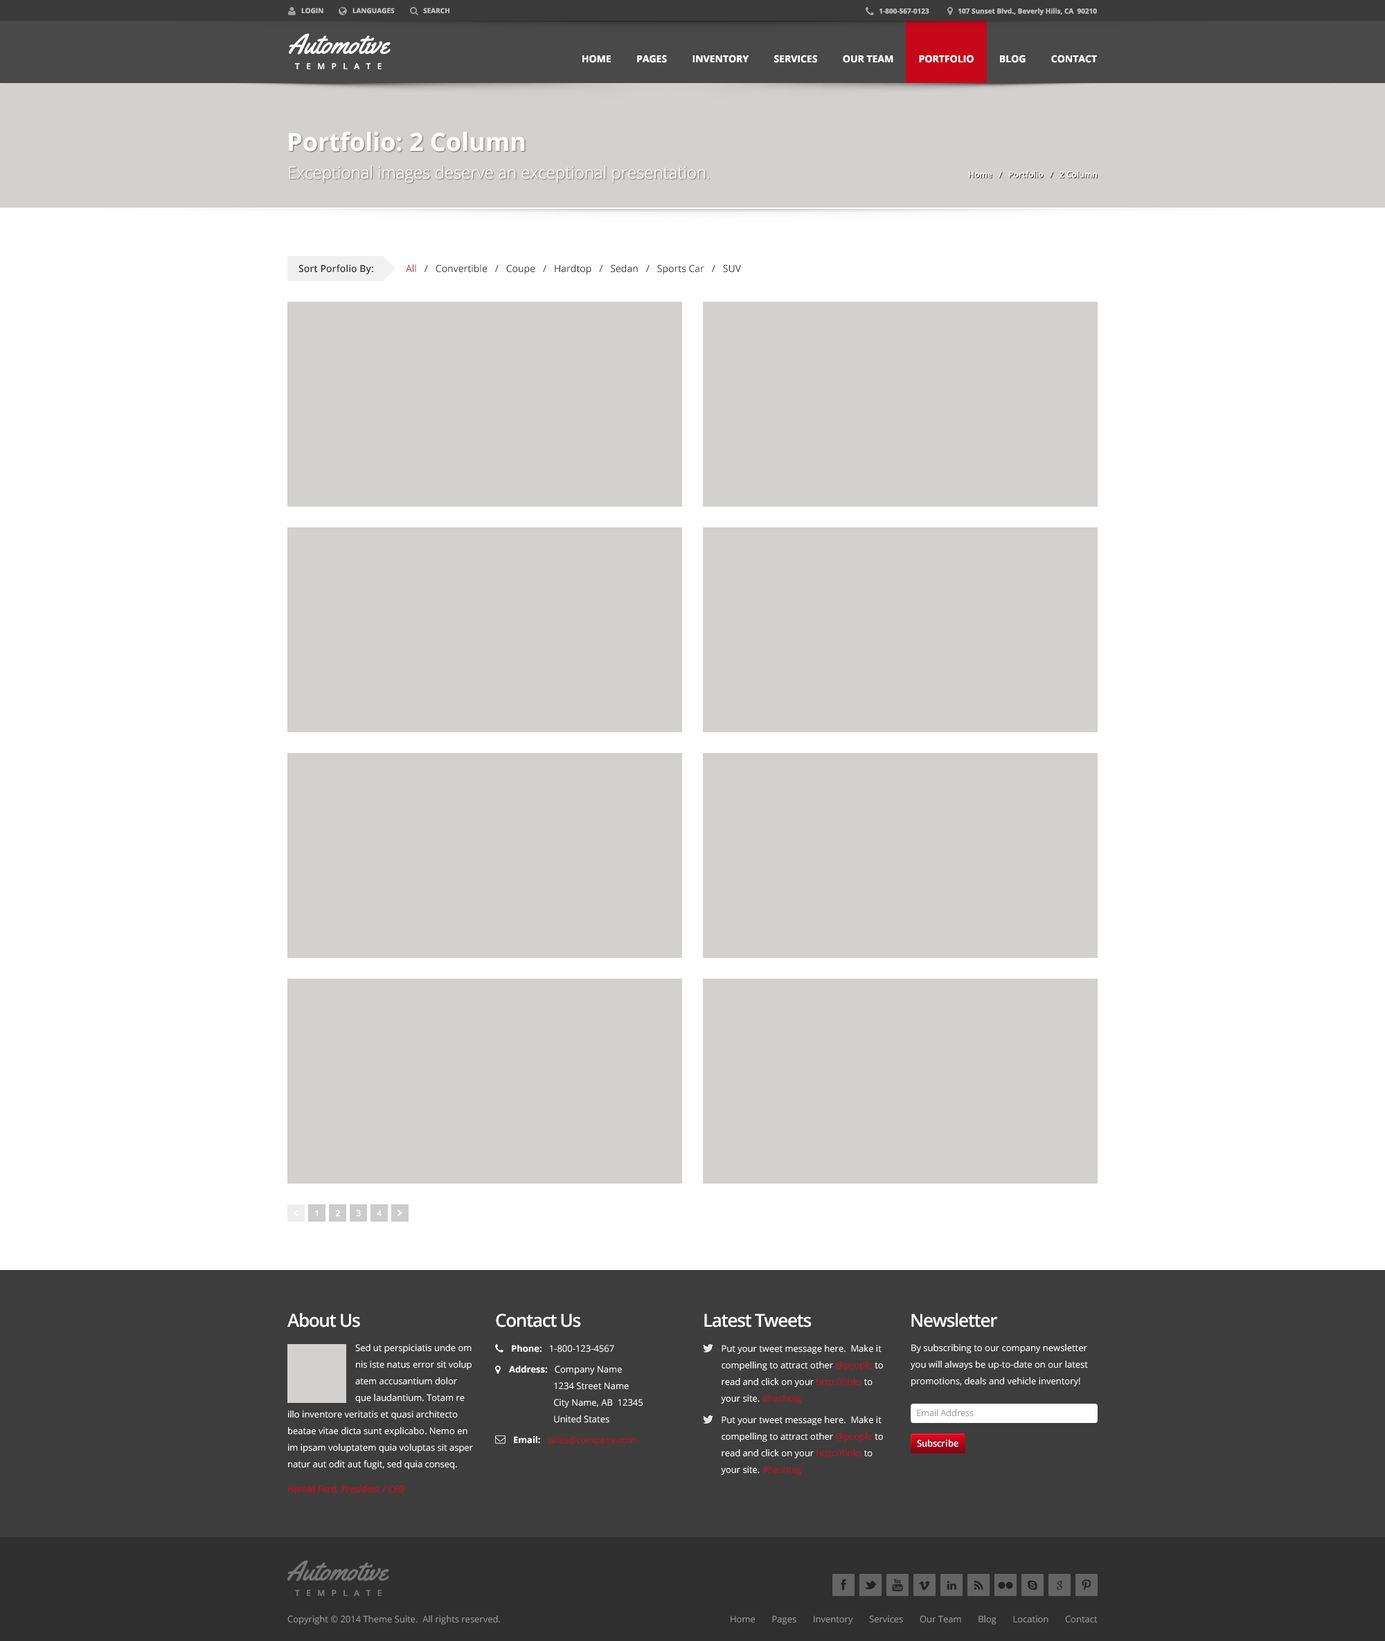
<style>
.page{position:relative;width:1385px;height:1641px;background:#d2d1d0}
.page>*{position:absolute;margin:0}
.t1{font:6.9px "OpenSans-Bold";color:#c0c0c0}
.t2{font:27.7px "Yellowtail";color:#ffffff}
.t3{font:9.7px "OpenSans-Bold";color:#ffffff}
.t4{font:24.9px "OpenSans-Bold";color:#ffffff}
.t5{font:16.6px "OpenSans-Light";color:#ffffff}
.t6{font:8.3px "OpenSans-Semibold";color:#ffffff}
.t7{font:9.7px "OpenSans";color:#2d2d2d}
.t8{font:9.7px "OpenSans-Semibold";color:#2d2d2d}
.t9{font:9.7px "OpenSans";color:#c7081b}
.t10{font:18px "OpenSans-Semibold";letter-spacing:-0.05em;color:#ffffff}
.t11{font:9px/16.6px "OpenSans";color:#ffffff}
.t12{font:9px "OpenSans";color:#ffffff}
.t13{font:9px "OpenSans-Bold";color:#ffffff}
.t14{font:9px/16.6px "OpenSans";color:#c7081b}
.t15{font:9px/13.8px "OpenSans-Bold";color:#ffffff}
.t16{font:9px "OpenSans";color:#999999}
.t17{font:9px/24.9px "OpenSans-SemiboldItalic";color:#c7081b}
.t18{font:9px "OpenSans";color:#c7081b}
.t19{font:9px "OpenSans-Semibold";color:#ffffff}
.t20{font:27.7px "Yellowtail";color:#787878}
.t21{font:8.3px "OpenSans-Semibold";color:#787878}
</style>
<div class="page">
<p class="t1" style="left:301px;top:8px;width:148px;height:6px">LOGIN                LANGUAGES                SEARCH</p>
<p class="t1" style="left:879px;top:8px;width:218px;height:7px">1-800-567-0123                107 Sunset Blvd., Beverly Hills, CA  90210</p>
<p class="t2" style="left:289px;top:33px;width:101px;height:22px">Automotive</p>
<p class="t3" style="left:582px;top:55px;width:515px;height:8px">HOME          PAGES          INVENTORY          SERVICES          OUR TEAM          PORTFOLIO          BLOG          CONTACT</p>
<p class="t4" style="left:289px;top:132px;width:236px;height:20px">Portfolio: 2 Column</p>
<p class="t5" style="left:289px;top:165px;width:420px;height:18px">Exceptional images deserve an exceptional presentation.</p>
<p class="t6" style="left:969px;top:171px;width:128px;height:7px">Home   /   Portfolio   /   2 Column</p>
<p class="t7" style="left:298px;top:264px;width:443px;height:11px"><span class="t8">Sort Porfolio By:    </span><span class="t9">All   </span>/   Convertible   /   Coupe   /   Hardtop   /   Sedan   /   Sports Car   /   SUV</p>
<p class="t6" style="left:315px;top:1210px;width:3px;height:7px">1</p>
<p class="t6" style="left:335px;top:1210px;width:5px;height:7px">2</p>
<p class="t6" style="left:356px;top:1210px;width:5px;height:7px">3</p>
<p class="t6" style="left:377px;top:1210px;width:5px;height:7px">4</p>
<p class="t10" style="left:287px;top:1313px;width:73px;height:15px">About Us</p>
<p class="t10" style="left:911px;top:1313px;width:86px;height:15px">Newsletter</p>
<p class="t10" style="left:496px;top:1314px;width:85px;height:14px">Contact Us</p>
<p class="t10" style="left:704px;top:1314px;width:107px;height:14px">Latest Tweets</p>
<p class="t11" style="left:355px;top:1344px;width:116px;height:59px">Sed ut perspiciatis unde om<br>nis iste natus error sit volup<br>atem accusantium dolor<br>que laudantium. Totam re</p>
<p class="t12" style="left:512px;top:1345px;width:102px;height:8px"><span class="t13">Phone:   </span>1-800-123-4567</p>
<p class="t11" style="left:721px;top:1345px;width:162px;height:59px">Put your tweet message here.  Make it <br>compelling to attract other <span class="t14">@people </span>to <br>read and click on your <span class="t14">http://links </span>to <br>your site. <span class="t14">#hashtag</span></p>
<p class="t11" style="left:910px;top:1344px;width:178px;height:43px">By subscribing to our company newsletter<br>you will always be up-to-date on our latest<br>promotions, deals and vehicle inventory!</p>
<p class="t11" style="left:509px;top:1366px;width:133px;height:57px"><span class="t15">Address:   </span>Company Name<br>                   1234 Street Name<br>                   City Name, AB  12345<br>                   United States</p>
<p class="t16" style="left:917px;top:1410px;width:56px;height:7px">Email Address</p>
<p class="t11" style="left:287px;top:1411px;width:186px;height:83px">illo inventore veritatis et quasi architecto <br>beatae vitae dicta sunt explicabo. Nemo en<br>im ipsam voluptatem quia voluptas sit asper<br>natur aut odit aut fugit, sed quia conseq.<br><span class="t17">Harold Ford, President / CEO</span></p>
<p class="t11" style="left:721px;top:1416px;width:162px;height:59px">Put your tweet message here.  Make it <br>compelling to attract other <span class="t14">@people </span>to <br>read and click on your <span class="t14">http://links </span>to <br>your site. <span class="t14">#hashtag</span></p>
<p class="t18" style="left:514px;top:1437px;width:121px;height:9px"><span class="t13">Email:   </span>sales@company.com</p>
<p class="t19" style="left:917px;top:1440px;width:41px;height:8px">Subscribe</p>
<p class="t20" style="left:287px;top:1560px;width:102px;height:22px">Automotive</p>
<p class="t21" style="left:295px;top:1590px;width:86px;height:6px">T   E   M   P   L   A   T   E</p>
<p class="t16" style="left:287px;top:1616px;width:213px;height:9px">Copyright © 2014 Theme Suite.  All rights reserved.</p>
<p class="t16" style="left:730px;top:1616px;width:367px;height:9px">Home       Pages       Inventory       Services       Our Team       Blog       Location       Contact</p>
</div>
